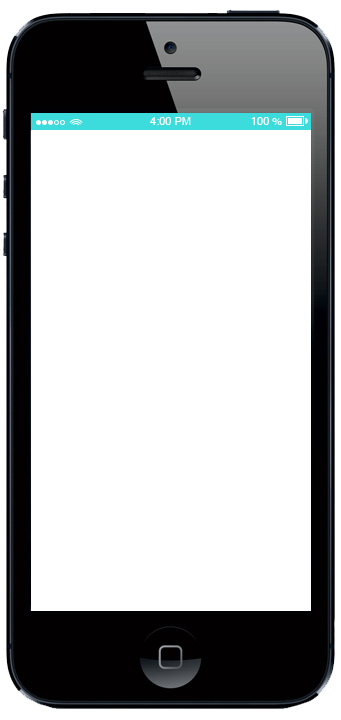
<style>
.page{position:relative;width:341px;height:720px;background:#ffffff}
.page>*{position:absolute;margin:0}
.t1{font:11px "Helvetica";color:#ffffff}
</style>
<div class="page">
<p class="t1" style="left:150px;top:117px;width:41px;height:8px">4:00 PM</p>
<p class="t1" style="left:251px;top:117px;width:31px;height:8px">100 %</p>
</div>
